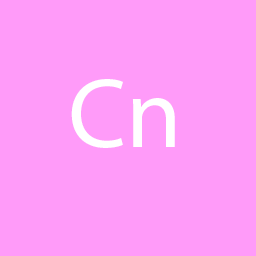
<style>
.page{position:relative;width:256px;height:256px;background:#ff9bf9}
.page>*{position:absolute;margin:0}
.t1{font:100px "MyriadPro-Regular";color:#ffffff}
</style>
<div class="page">
<p class="t1" style="left:71px;top:79px;width:104px;height:69px">Cn</p>
</div>
